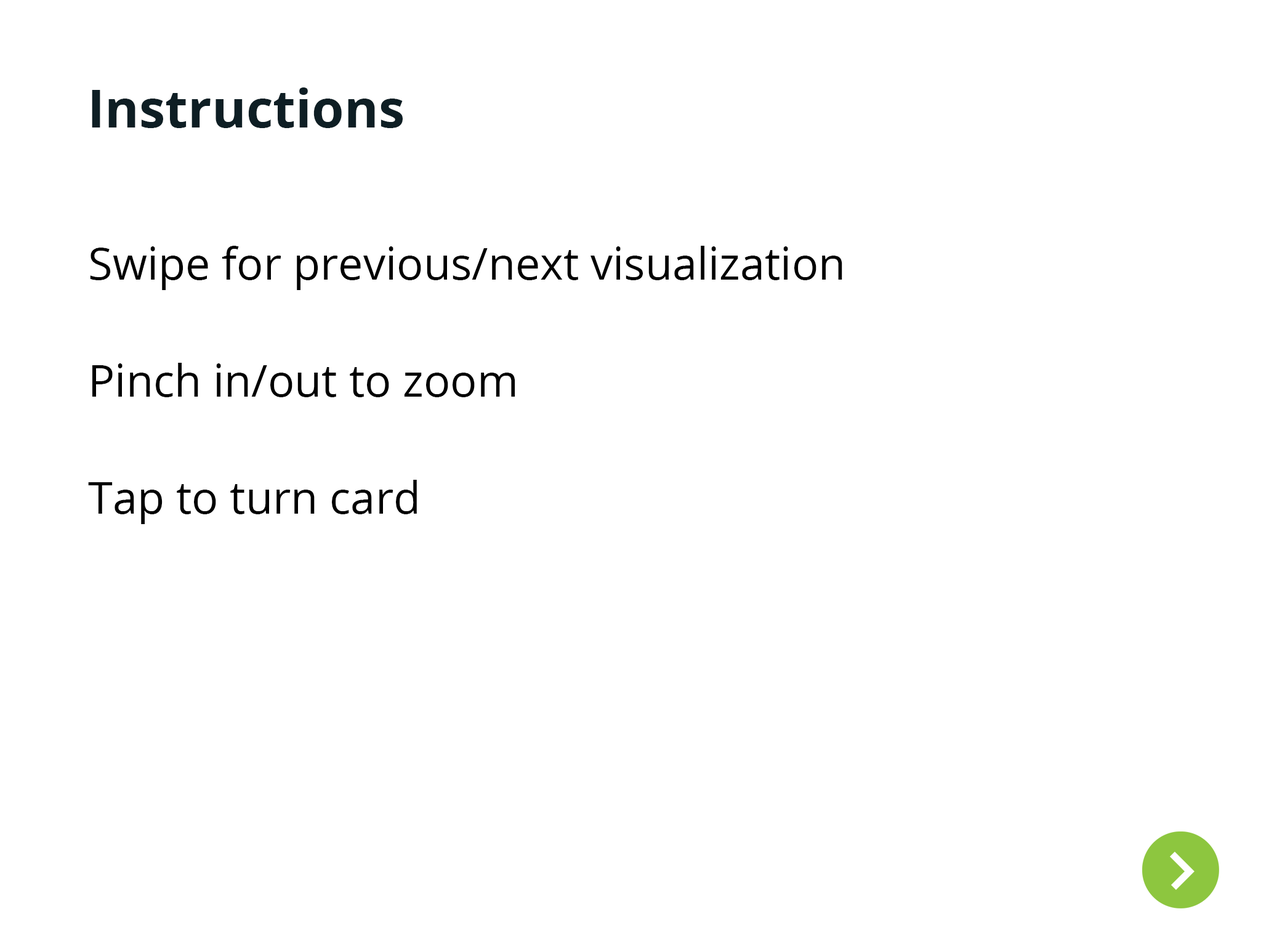
<style>
.page{position:relative;width:1261px;height:946px;background:#ffffff}
.page>*{position:absolute;margin:0}
.t1{font:52.3px "OpenSans-Bold";color:#0e1e24}
.t2{font:44.3px/58.5px "OpenSans";color:#000000}
</style>
<div class="page">
<p class="t1" style="left:92px;top:87px;width:311px;height:41px">Instructions</p>
<p class="t2" style="left:88px;top:246px;width:754px;height:278px">Swipe for previous/next visualization<br><br>Pinch in/out to zoom<br><br>Tap to turn card</p>
</div>
